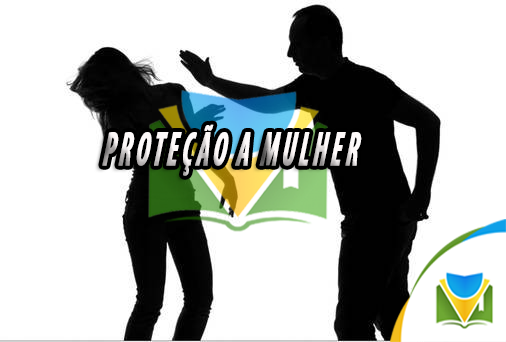
<style>
.page{position:relative;width:506px;height:342px;background:#ffffff}
.page>*{position:absolute;margin:0}
.t1{font:48.6px "MyriadPro-BoldCondIt";letter-spacing:0.1em;color:#fdf8f8;text-transform:uppercase;font-weight:bold;font-style:italic;scale:0.56 1}
</style>
<div class="page">
<p class="t1" style="left:102px;top:124px;width:260px;height:52px">proteção a mulher</p>
</div>
